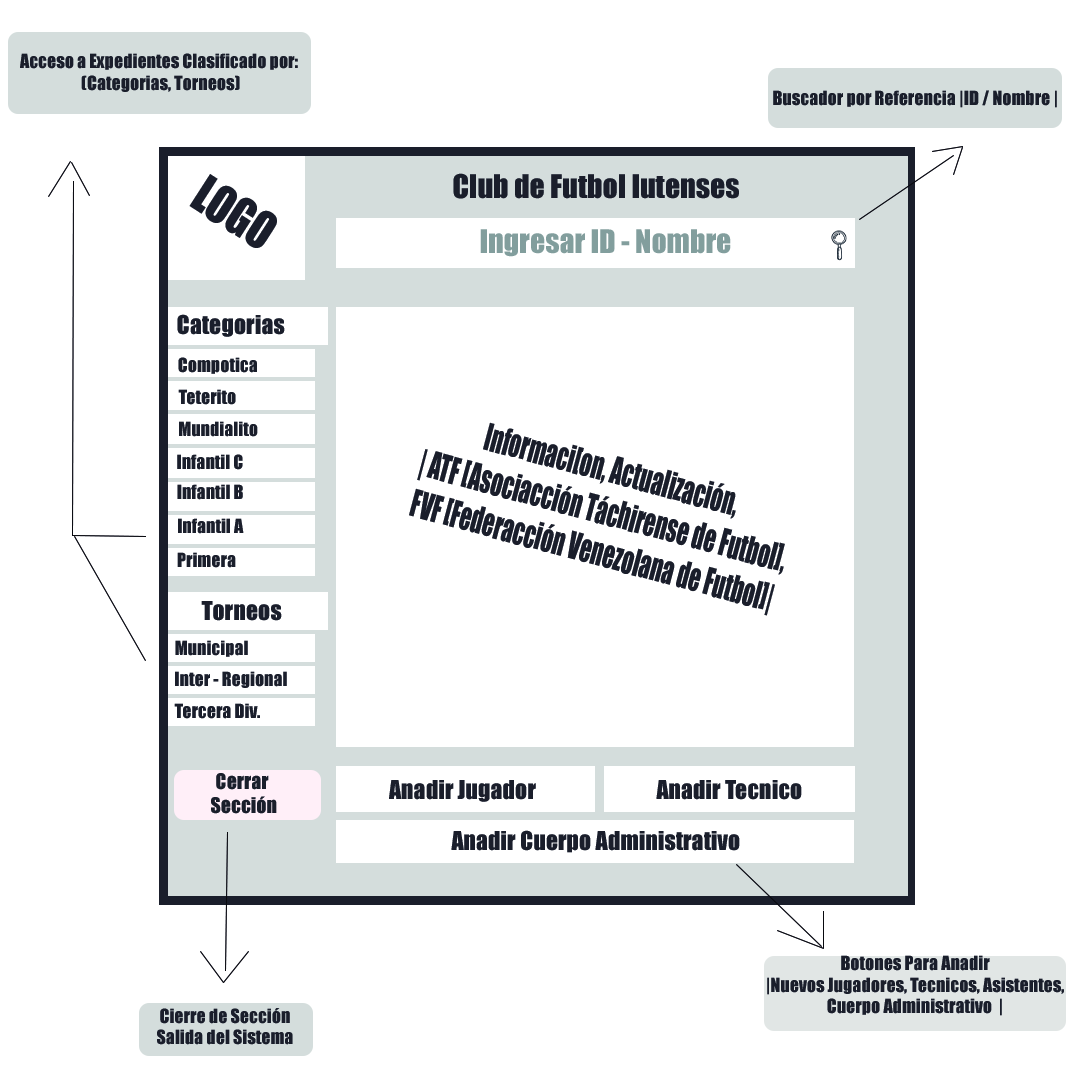
<style>
.page{position:relative;width:1080px;height:1080px;background:#ffffff}
.page>*{position:absolute;margin:0}
.t1{font:18px "Impact";color:#1a1e2b}
.t2{font:48.1px "Impact";color:#1a1e2b;scale:0.9 1}
.t3{font:30px "Impact";color:#1a1e2b}
.t4{font:30px "Impact";color:#829e9d}
.t5{font:24px "Impact";color:#1a1e2b}
.t6{font:34.7px "Impact";color:#1a1e2b;scale:0.66 1}
.t7{font:20px "Impact";color:#1a1e2b}
</style>
<div class="page">
<p class="t1" style="left:20px;top:53px;width:278px;height:39px;text-align:center">Acceso a Expedientes Clasificado por: <br>(Categorias, Torneos)</p>
<p class="t1" style="left:773px;top:90px;width:284px;height:18px">Buscador por Referencia |ID / Nombre |</p>
<p class="t2" style="left:189px;top:174px;width:88px;height:74px;rotate:33deg">LOGO</p>
<p class="t3" style="left:453px;top:173px;width:286px;height:26px">Club de Futbol Iutenses</p>
<p class="t4" style="left:480px;top:229px;width:251px;height:28px">Ingresar ID - Nombre</p>
<p class="t5" style="left:177px;top:314px;width:108px;height:23px">Categorias</p>
<p class="t1" style="left:178px;top:357px;width:79px;height:17px">Compotica</p>
<p class="t1" style="left:178px;top:389px;width:58px;height:16px">Teterito</p>
<p class="t1" style="left:179px;top:421px;width:79px;height:16px">Mundialito</p>
<p class="t6" style="left:409px;top:422px;width:376px;height:194px;text-align:center;rotate:15deg">Informaci[on, Actualización, <br> | ATF [Asociacción Táchirense de Futbol], <br>FVF [Federacción Venezolana de Futbol]|</p>
<p class="t1" style="left:177px;top:454px;width:66px;height:16px">Infantil C</p>
<p class="t1" style="left:177px;top:484px;width:66px;height:16px">Infantil B</p>
<p class="t1" style="left:178px;top:518px;width:66px;height:16px">Infantil A</p>
<p class="t1" style="left:177px;top:552px;width:59px;height:16px">Primera</p>
<p class="t5" style="left:201px;top:601px;width:81px;height:20px">Torneos</p>
<p class="t1" style="left:175px;top:640px;width:73px;height:17px">Municipal</p>
<p class="t1" style="left:175px;top:671px;width:112px;height:17px">Inter - Regional</p>
<p class="t1" style="left:174px;top:703px;width:86px;height:16px">Tercera Div.</p>
<p class="t7" style="left:211px;top:773px;width:66px;height:41px;text-align:center">Cerrar<br> Sección</p>
<p class="t5" style="left:389px;top:780px;width:147px;height:22px">Anadir Jugador</p>
<p class="t5" style="left:656px;top:780px;width:146px;height:20px">Anadir Tecnico</p>
<p class="t5" style="left:451px;top:830px;width:289px;height:23px">Anadir Cuerpo Administrativo</p>
<p class="t1" style="left:767px;top:955px;width:297px;height:61px;text-align:center">Botones Para Anadir <br>|Nuevos Jugadores, Tecnicos, Asistentes, Cuerpo Administrativo  |</p>
<p class="t1" style="left:157px;top:1008px;width:136px;height:37px;text-align:center">Cierre de Sección<br>Salida del Sistema</p>
</div>
